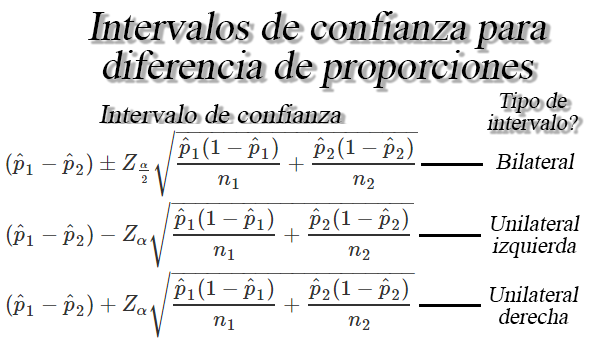
<style>
.page{position:relative;width:616px;height:342px;background:#ffffff}
.page>*{position:absolute;margin:0}
.t1{font:30.5px/38.9px "TimesNewRomanPSMT";color:#000000;font-style:italic}
.t2{font:17px/21.7px "TimesNewRomanPSMT";color:#000000;font-style:italic}
.t3{font:20.4px "TimesNewRomanPSMT";color:#000000;font-style:italic}
.t4{font:17px "TimesNewRomanPSMT";color:#000000;font-style:italic}
</style>
<div class="page">
<p class="t1" style="left:88px;top:11px;width:459px;height:77px;text-align:center">Intervalos de confianza para<br>diferencia de proporciones</p>
<p class="t2" style="left:487px;top:92px;width:91px;height:38px;text-align:center">Tipo de<br>intervalo?</p>
<p class="t3" style="left:99px;top:104px;width:243px;height:19px">Intervalo de confianza</p>
<p class="t4" style="left:496px;top:153px;width:79px;height:16px">Bilateral</p>
<p class="t2" style="left:491px;top:215px;width:89px;height:43px;text-align:center">Unilateral<br>izquierda</p>
<p class="t2" style="left:490px;top:286px;width:89px;height:38px;text-align:center">Unilateral<br>derecha</p>
</div>
